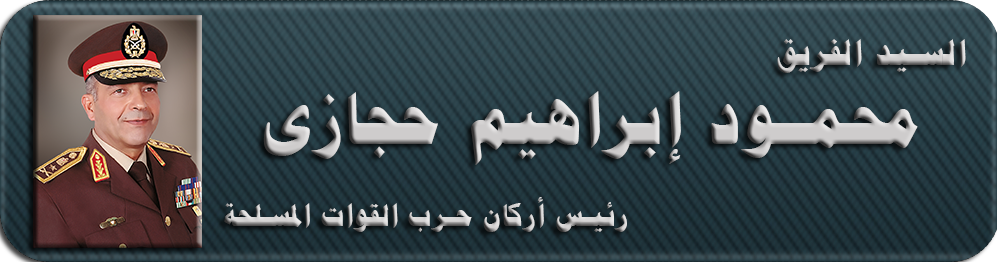
<style>
.page{position:relative;width:997px;height:262px}
.page>*{position:absolute;margin:0}
.t1{font:30px/41px "PTBoldHeading";letter-spacing:0.06em;color:#cecccc}
.t2{font:35px/79px "PTBoldHeading";letter-spacing:0.06em;color:#cecccc}
.t3{font:70px/79px "PTBoldHeading";letter-spacing:0.06em;color:#cecccc}
</style>
<div class="page">
<p class="t1" style="left:224px;top:39px;width:742px;height:193px;text-align:right"><span class="t2">السيد الفريق<br></span><span class="t3">محمود إبراهيم حجازى<br></span><br> رئيس أركان حرب القوات المسلحة</p>
</div>
